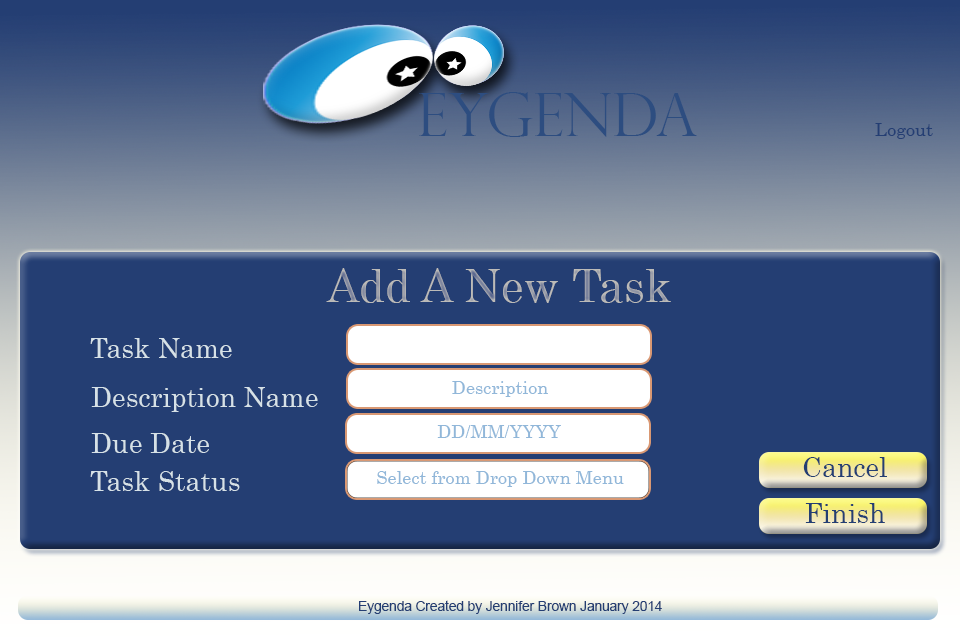
<style>
.page{position:relative;width:960px;height:640px;background:#243e73}
.page>*{position:absolute;margin:0}
.t1{font:60px "PerpetuaTitlingMT-Light";color:#2d4d80}
.t2{font:18.1px "Century";color:#243e73}
.t3{font:45.3px "Century"}
.t4{font:27.2px "Century";color:#d6e1e7}
.t5{font:18.1px "Century";color:#91b7d9}
.t6{font:27.2px "Century";color:#243e73}
.t7{font:13.6px "ArialMT";color:#243e73}
</style>
<div class="page">
<p class="t1" style="left:419px;top:92px;width:278px;height:45px">EYGENDA</p>
<p class="t2" style="left:875px;top:123px;width:58px;height:16px">Logout</p>
<p class="t3" style="left:326px;top:268px;width:345px;height:35px">Add A New Task</p>
<p class="t4" style="left:90px;top:338px;width:142px;height:20px">Task Name</p>
<p class="t4" style="left:91px;top:387px;width:227px;height:25px">Description Name</p>
<p class="t5" style="left:452px;top:381px;width:96px;height:16px">Description</p>
<p class="t5" style="left:437px;top:425px;width:124px;height:13px">DD/MM/YYYY</p>
<p class="t4" style="left:91px;top:433px;width:118px;height:20px">Due Date</p>
<p class="t6" style="left:803px;top:457px;width:84px;height:20px">Cancel</p>
<p class="t4" style="left:90px;top:471px;width:150px;height:20px">Task Status</p>
<p class="t5" style="left:377px;top:471px;width:247px;height:16px">Select from Drop Down Menu</p>
<p class="t6" style="left:805px;top:503px;width:80px;height:20px">Finish</p>
<p class="t7" style="left:359px;top:600px;width:303px;height:14px">Eygenda Created by Jennifer Brown January 2014</p>
</div>
